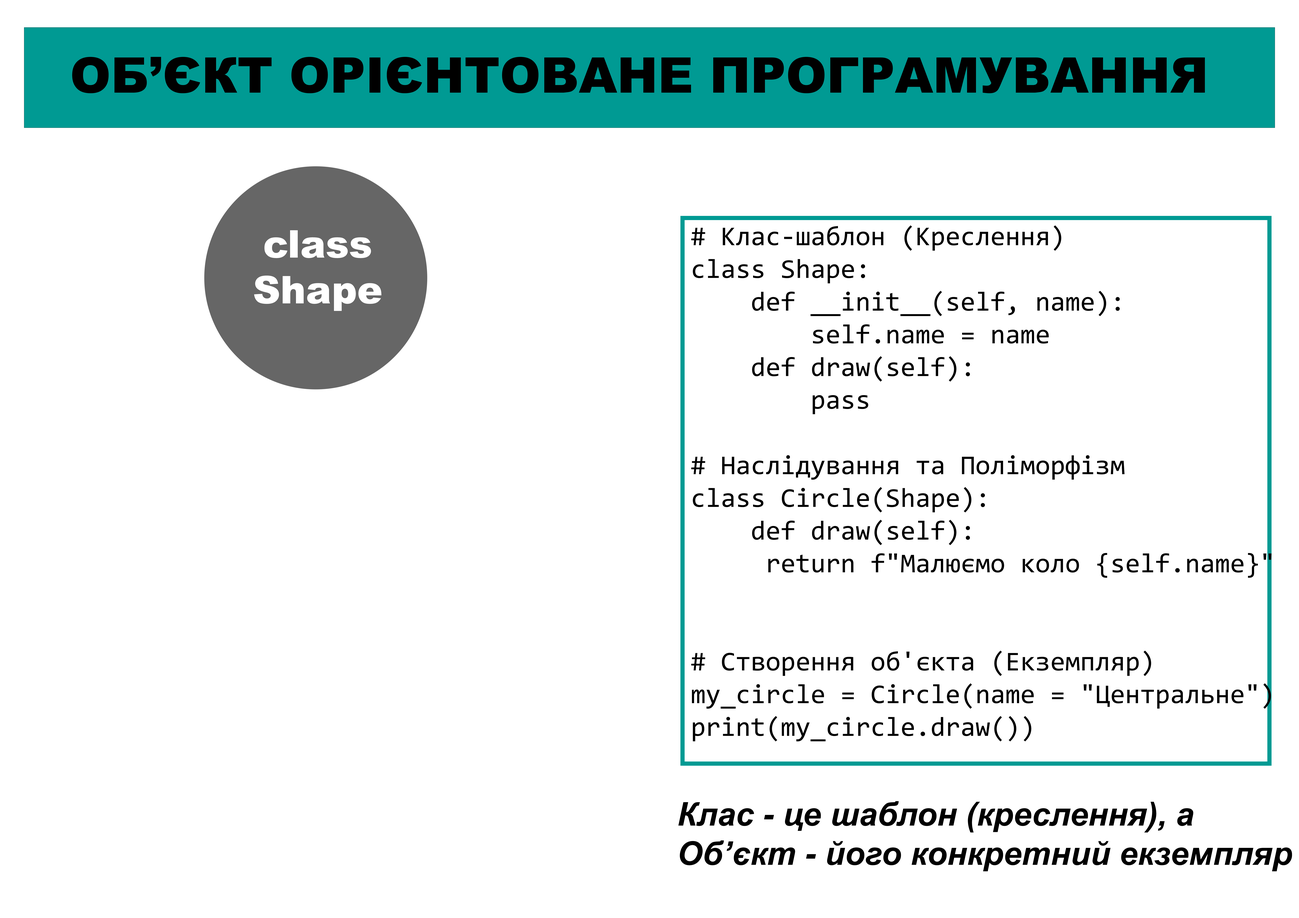
<style>
.page{position:relative;width:1299px;height:918px;background:#ffffff}
.page>*{position:absolute;margin:0}
.t1{font:49.1px "Arial-Black";color:#000000}
.t2{font:38.2px "Arial-Black";color:#ffffff}
.t3{font:27.3px "Consolas";color:#000000}
.t4{font:32.7px "Arial-BoldItalicMT";color:#000000}
</style>
<div class="page">
<p class="t1" style="left:72px;top:57px;width:1133px;height:36px">ОБ’ЄКТ ОРІЄНТОВАНЕ ПРОГРАМУВАННЯ</p>
<p class="t2" style="left:254px;top:230px;width:128px;height:81px;text-align:center">class Shape</p>
<p class="t3" style="left:691px;top:225px;width:581px;height:516px"># Клас-шаблон (Креслення)<br>class Shape:<br>    def __init__(self, name):<br>        self.name = name<br>    def draw(self):<br>        pass<br>       <br># Наслідування та Поліморфізм<br>class Circle(Shape):<br>    def draw(self):<br>     return f"Малюємо коло {self.name}"<br>        <br><br># Створення об'єкта (Екземпляр)<br>my_circle = Circle(name = "Центральне")<br>print(my_circle.draw())</p>
<p class="t4" style="left:678px;top:801px;width:614px;height:70px">Клас - це шаблон (креслення), а<br>Об’єкт - його конкретний екземпляр</p>
</div>
